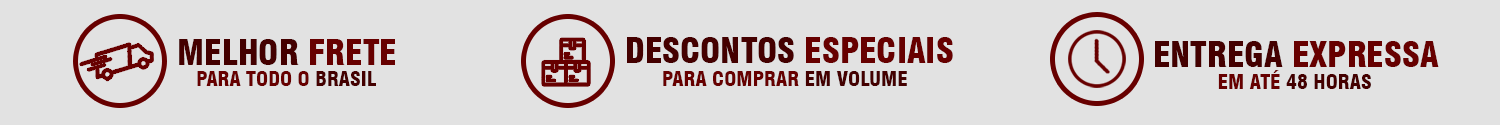
<style>
.page{position:relative;width:1500px;height:125px;background:#e2e2e2}
.page>*{position:absolute;margin:0}
.t1{font:34.1px "Swiss721BT-BlackCondensed";color:#440000}
.t2{font:34.1px "Swiss721BT-BlackCondensed";color:#670000}
.t3{font:20px "Swiss721BT-BlackCondensed";color:#670000}
.t4{font:20px "Swiss721BT-BlackCondensed";color:#440000}
</style>
<div class="page">
<p class="t1" style="left:179px;top:39px;width:216px;height:26px">MELHOR <span class="t2">FRETE</span></p>
<p class="t1" style="left:627px;top:37px;width:326px;height:26px">DESCONTOS<span class="t2"> ESPECIAIS</span></p>
<p class="t2" style="left:1155px;top:41px;width:284px;height:26px"><span class="t1">ENTREGA </span>EXPRESSA</p>
<p class="t3" style="left:197px;top:71px;width:179px;height:15px">PARA TODO O <span class="t4">BRASIL</span></p>
<p class="t3" style="left:663px;top:71px;width:244px;height:15px">PARA COMPRAR <span class="t4">EM VOLUME</span></p>
<p class="t4" style="left:1218px;top:70px;width:153px;height:19px"><span class="t3">EM ATÉ </span>48 HORAS</p>
</div>
